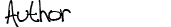
<style>
.page{position:relative;width:171px;height:27px;background:#ffffff}
.page>*{position:absolute;margin:0}
.t1{font:36px "TallPaul";color:#000000}
</style>
<div class="page">
<p class="t1" style="left:5px;top:0px;width:66px;height:28px">Author</p>
</div>
